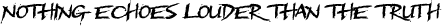
<style>
.page{position:relative;width:442px;height:26px;background:#ffffff}
.page>*{position:absolute;margin:0}
.t1{font:25px "BMXRadical";color:#000000}
</style>
<div class="page">
<p class="t1" style="left:0px;top:0px;width:442px;height:26px">Nothing echoes louder than the truth</p>
</div>
